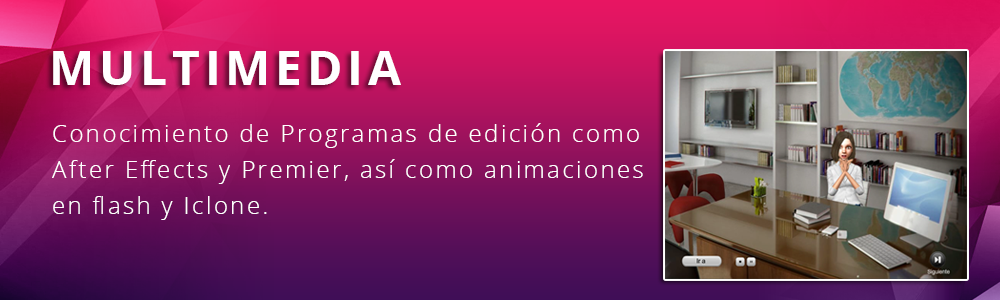
<style>
.page{position:relative;width:1000px;height:300px}
.page>*{position:absolute;margin:0}
.t1{font:48px "OpenSans-Bold";letter-spacing:0.1em;color:#ffffff}
.t2{font:24px/36px "OpenSans-Light";letter-spacing:0.1em;color:#ffffff}
</style>
<div class="page">
<p class="t1" style="left:53px;top:51px;width:348px;height:34px">MULTIMEDIA</p>
<p class="t2" style="left:52px;top:123px;width:591px;height:97px">Conocimiento de Programas de edición como After Effects y Premier, así como animaciones en flash y Iclone.</p>
</div>
